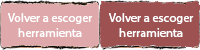
<style>
.page{position:relative;width:200px;height:50px;background:#9e5151}
.page>*{position:absolute;margin:0}
.t1{font:12.5px "MyriadHebrew-Regular";color:#ffffff}
</style>
<div class="page">
<p class="t1" style="left:8px;top:13px;width:85px;height:24px;text-align:center">Volver a escoger herramienta</p>
<p class="t1" style="left:109px;top:13px;width:85px;height:24px;text-align:center">Volver a escoger herramienta</p>
</div>
